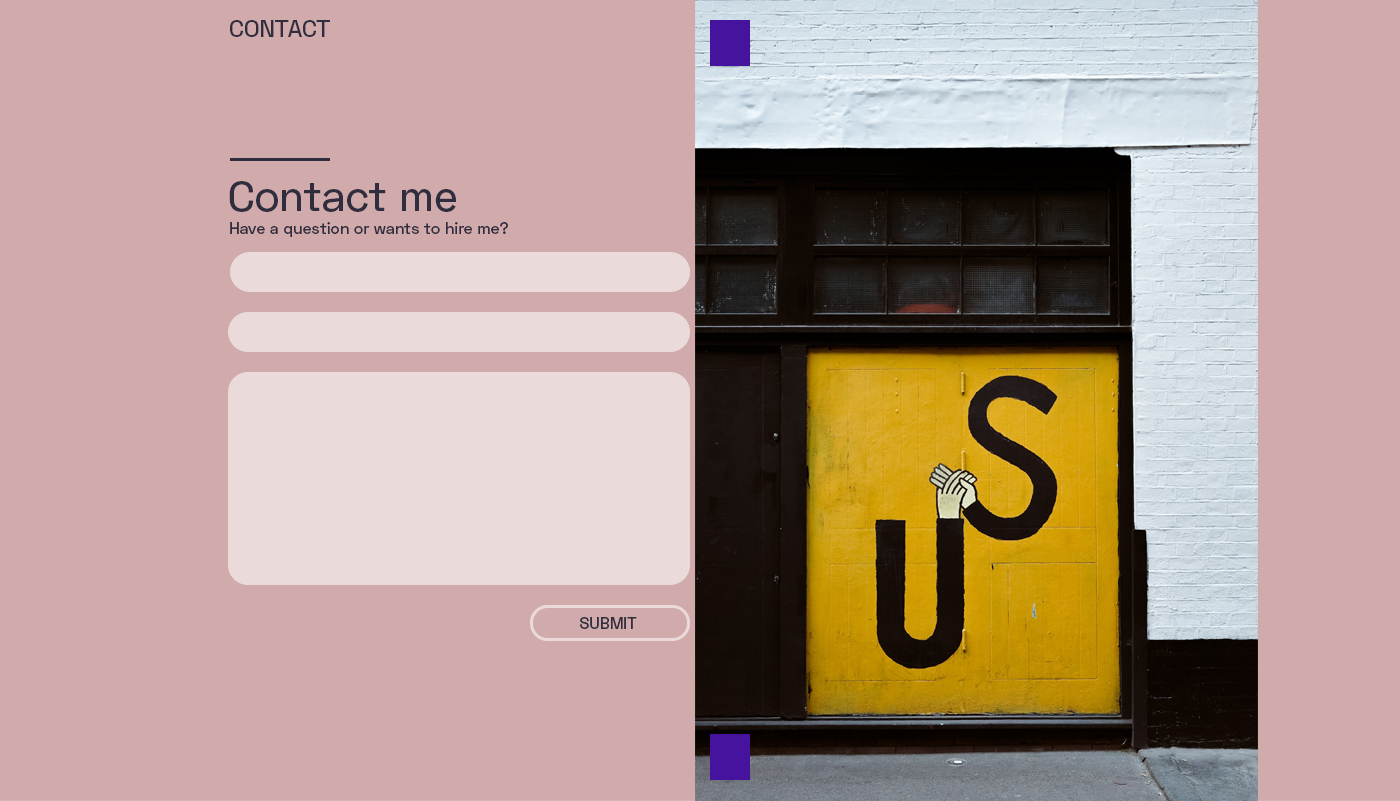
<style>
.page{position:relative;width:1400px;height:801px;background:#d1abac}
.page>*{position:absolute;margin:0}
.t1{font:24px "SpaceGrotesk-Medium";color:#302e3e}
.t2{font:42px "SpaceGrotesk-Medium";color:#302e3e}
.t3{font:16px "SpaceGrotesk-Medium";color:#302e3e}
</style>
<div class="page">
<p class="t1" style="left:230px;top:20px;width:100px;height:17px">CONTACT</p>
<p class="t2" style="left:229px;top:181px;width:227px;height:31px">Contact me</p>
<p class="t3" style="left:230px;top:222px;width:278px;height:15px">Have a question or wants to hire me?</p>
<p class="t3" style="left:580px;top:617px;width:57px;height:12px">SUBMIT</p>
</div>
